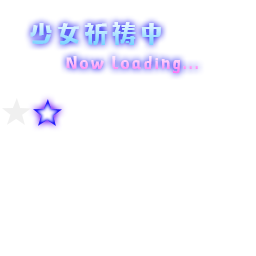
<style>
.page{position:relative;width:256px;height:256px;background:#ffffff}
.page>*{position:absolute;margin:0}
.t1{font:24px "MFTongXin_Noncommercial-Regular";letter-spacing:0.15em}
.t2{font:14.7px "MFTongXin_Noncommercial-Regular";letter-spacing:0.15em}
</style>
<div class="page">
<p class="t1" style="left:30px;top:22px;width:131px;height:23px">少女祈祷中</p>
<p class="t2" style="left:66px;top:56px;width:132px;height:18px">Now Loading...</p>
</div>
